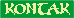
<style>
.page{position:relative;width:74px;height:18px;background:#029834}
.page>*{position:absolute;margin:0}
.t1{font:17.7px "SevenSwordsmenBB";color:#eeefa3}
</style>
<div class="page">
<p class="t1" style="left:5px;top:3px;width:65px;height:12px">kontak</p>
</div>
